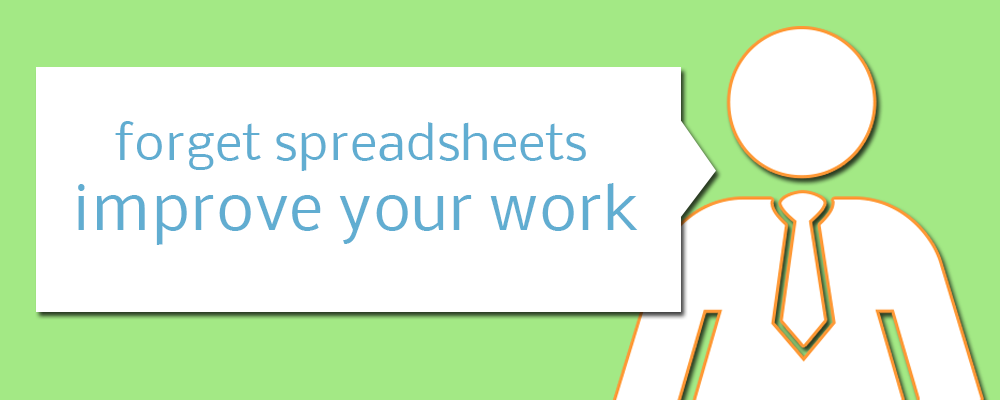
<style>
.page{position:relative;width:1000px;height:400px;background:#ffffff}
.page>*{position:absolute;margin:0}
.t1{font:48.2px "Nobile";color:#61add1}
.t2{font:59.9px "Nobile";color:#61add1}
</style>
<div class="page">
<p class="t1" style="left:115px;top:121px;width:471px;height:50px">forget spreadsheets</p>
<p class="t2" style="left:78px;top:183px;width:560px;height:62px">improve your work</p>
</div>
